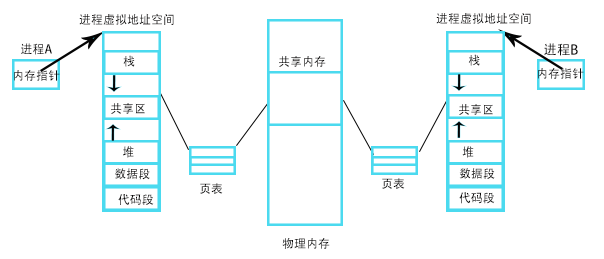
<style>
.page{position:relative;width:604px;height:259px;background:#ffffff}
.page>*{position:absolute;margin:0}
.t1{font:12px "AdobeHeitiStd-Regular";color:#0b0a0a}
.t2{font:13.3px "AdobeHeitiStd-Regular";color:#0b0a0a}
.t3{font:12px "AdobeHeitiStd-Regular"}
</style>
<div class="page">
<p class="t1" style="left:79px;top:13px;width:95px;height:12px">进程虚拟地址空间</p>
<p class="t1" style="left:436px;top:12px;width:95px;height:12px">进程虚拟地址空间</p>
<p class="t1" style="left:21px;top:43px;width:31px;height:12px">进程A</p>
<p class="t1" style="left:468px;top:54px;width:12px;height:12px">栈</p>
<p class="t2" style="left:544px;top:43px;width:34px;height:13px">进程B</p>
<p class="t1" style="left:123px;top:55px;width:12px;height:12px">栈</p>
<p class="t1" style="left:279px;top:56px;width:47px;height:11px">共享内存</p>
<p class="t1" style="left:14px;top:70px;width:46px;height:11px">内存指针</p>
<p class="t1" style="left:538px;top:68px;width:46px;height:11px">内存指针</p>
<p class="t3" style="left:111px;top:103px;width:34px;height:11px">共享区</p>
<p class="t3" style="left:459px;top:104px;width:34px;height:11px">共享区</p>
<p class="t1" style="left:123px;top:146px;width:11px;height:12px">堆</p>
<p class="t1" style="left:462px;top:146px;width:12px;height:12px">堆</p>
<p class="t1" style="left:115px;top:168px;width:35px;height:12px">数据段</p>
<p class="t1" style="left:459px;top:168px;width:36px;height:11px">数据段</p>
<p class="t1" style="left:200px;top:183px;width:23px;height:11px">页表</p>
<p class="t1" style="left:382px;top:178px;width:23px;height:11px">页表</p>
<p class="t1" style="left:118px;top:194px;width:36px;height:11px">代码段</p>
<p class="t1" style="left:459px;top:192px;width:36px;height:12px">代码段</p>
<p class="t1" style="left:282px;top:238px;width:48px;height:11px">物理内存</p>
</div>
